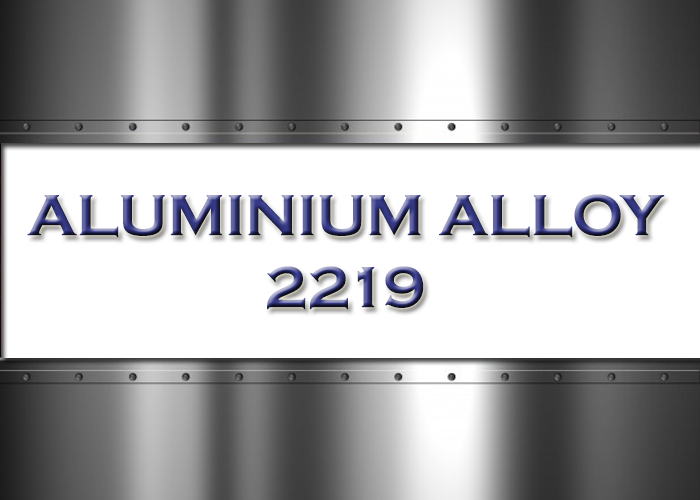
<style>
.page{position:relative;width:700px;height:500px;background:#ffffff}
.page>*{position:absolute;margin:0}
.t1{font:60px "CopperplateGothic-Bold"}
</style>
<div class="page">
<p class="t1" style="left:27px;top:194px;width:638px;height:116px;text-align:center">ALUMINIUM ALLOY<br>2219</p>
</div>
